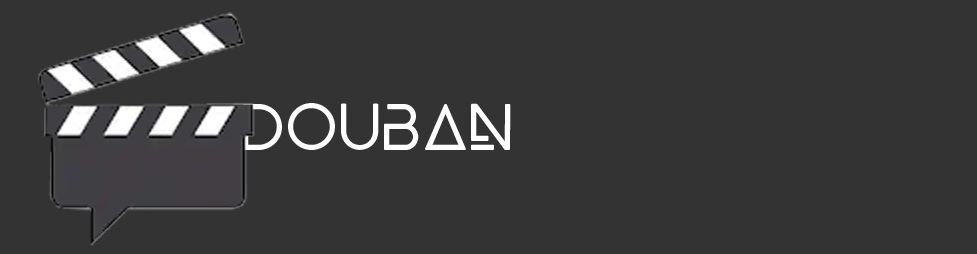
<style>
.page{position:relative;width:977px;height:254px;background:#333333}
.page>*{position:absolute;margin:0}
.t1{font:63.8px "BEYNO";color:#ffffff}
</style>
<div class="page">
<p class="t1" style="left:243px;top:103px;width:268px;height:47px">Douban</p>
</div>
